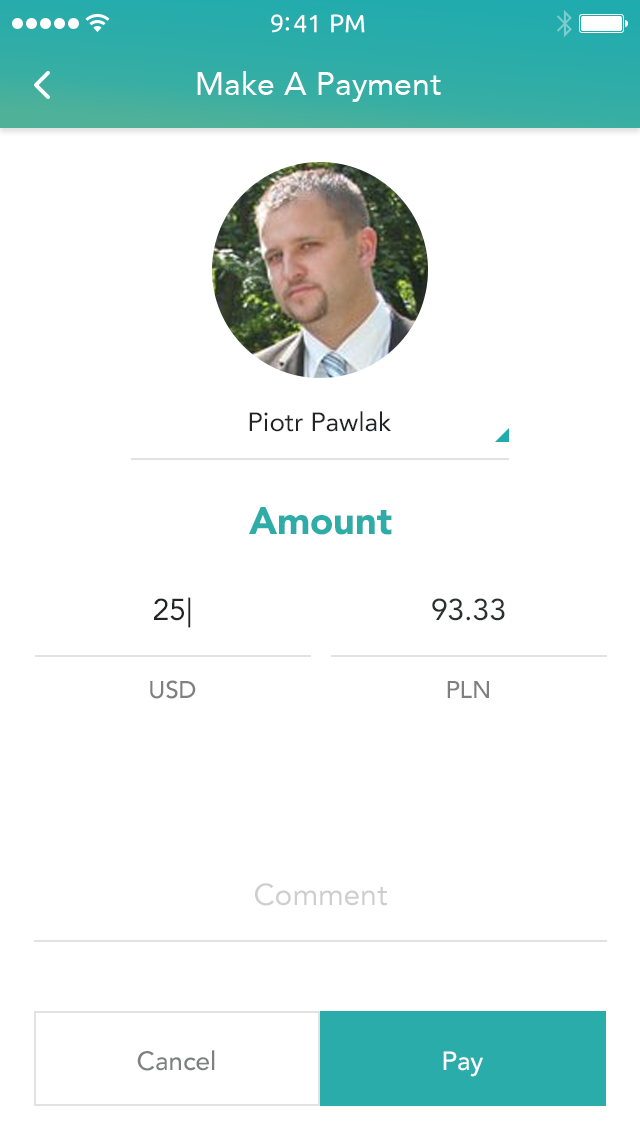
<style>
.page{position:relative;width:640px;height:1136px;background:#ffffff}
.page>*{position:absolute;margin:0}
.t1{font:25px "Ubuntu";color:#ffffff}
.t2{font:32px "Avenir-Roman";color:#ffffff}
.t3{font:26px "Avenir-Roman";color:#222325}
.t4{font:38px "Avenir-Black";color:#2eada8}
.t5{font:30px/78px "Avenir-Roman";color:#222325}
.t6{font:24px/78px "Avenir-Medium";color:#7f7f7f}
.t7{font:30px/30px "Avenir-Roman";color:#2a3231}
.t8{font:30px "Avenir-Roman";color:#cecece}
.t9{font:26px "Avenir-Medium";color:#7e7f7f}
.t10{font:26px "Avenir-Medium";color:#ffffff}
</style>
<div class="page">
<p class="t1" style="left:271px;top:14px;width:94px;height:19px">9:41 PM</p>
<p class="t2" style="left:197px;top:71px;width:244px;height:31px">Make A Payment</p>
<p class="t3" style="left:249px;top:411px;width:142px;height:21px">Piotr Pawlak</p>
<p class="t4" style="left:249px;top:507px;width:143px;height:28px">Amount</p>
<p class="t5" style="left:150px;top:597px;width:46px;height:102px;text-align:center">25|<br><span class="t6">USD</span></p>
<p class="t7" style="left:432px;top:598px;width:73px;height:100px;text-align:center">93.33<br><span class="t6">PLN</span></p>
<p class="t8" style="left:255px;top:883px;width:132px;height:23px">Comment</p>
<p class="t9" style="left:137px;top:1050px;width:78px;height:21px">Cancel</p>
<p class="t10" style="left:443px;top:1051px;width:40px;height:26px">Pay</p>
</div>
